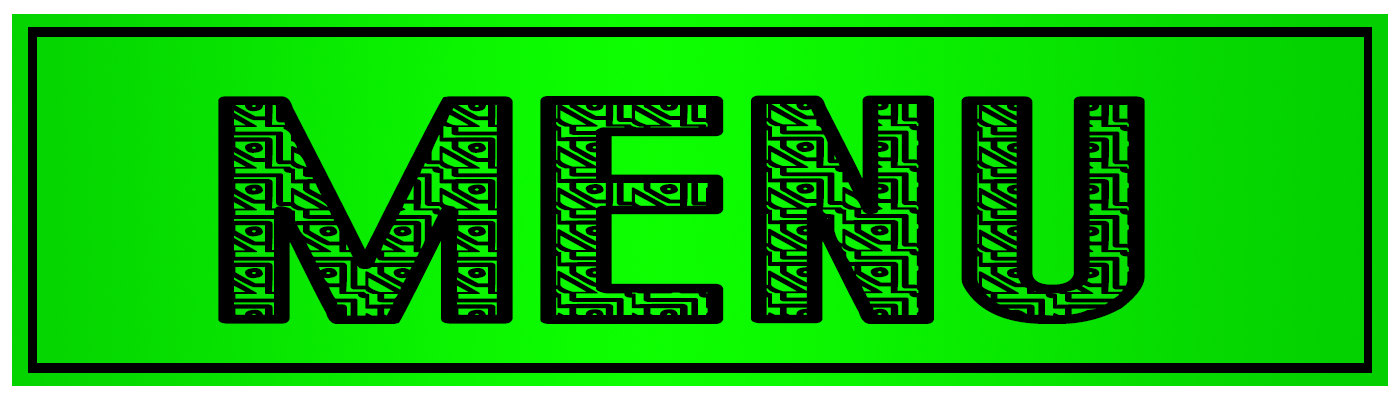
<style>
.page{position:relative;width:1400px;height:400px;background:#000000}
.page>*{position:absolute;margin:0}
.t1{font:213.6px "CalenduliaSt";color:#000000;scale:1.78 1}
</style>
<div class="page">
<p class="t1" style="left:218px;top:95px;width:927px;height:229px">MENU</p>
</div>
